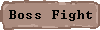
<style>
.page{position:relative;width:100px;height:30px;background:#ab8c7f}
.page>*{position:absolute;margin:0}
.t1{font:13px "Terminal";letter-spacing:0.04em;color:#000000}
</style>
<div class="page">
<p class="t1" style="left:9px;top:10px;width:83px;height:11px">Boss Fight</p>
</div>
